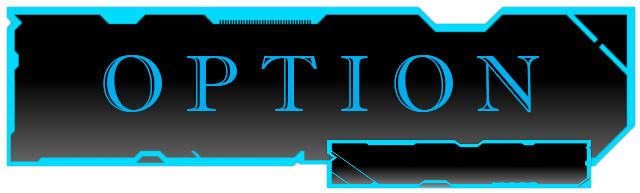
<style>
.page{position:relative;width:640px;height:193px;background:#000000}
.page>*{position:absolute;margin:0}
.t1{font:80px "ImprintMT-Shadow";color:#00aeef}
</style>
<div class="page">
<p class="t1" style="left:103px;top:55px;width:436px;height:58px">O P T I O N</p>
</div>
